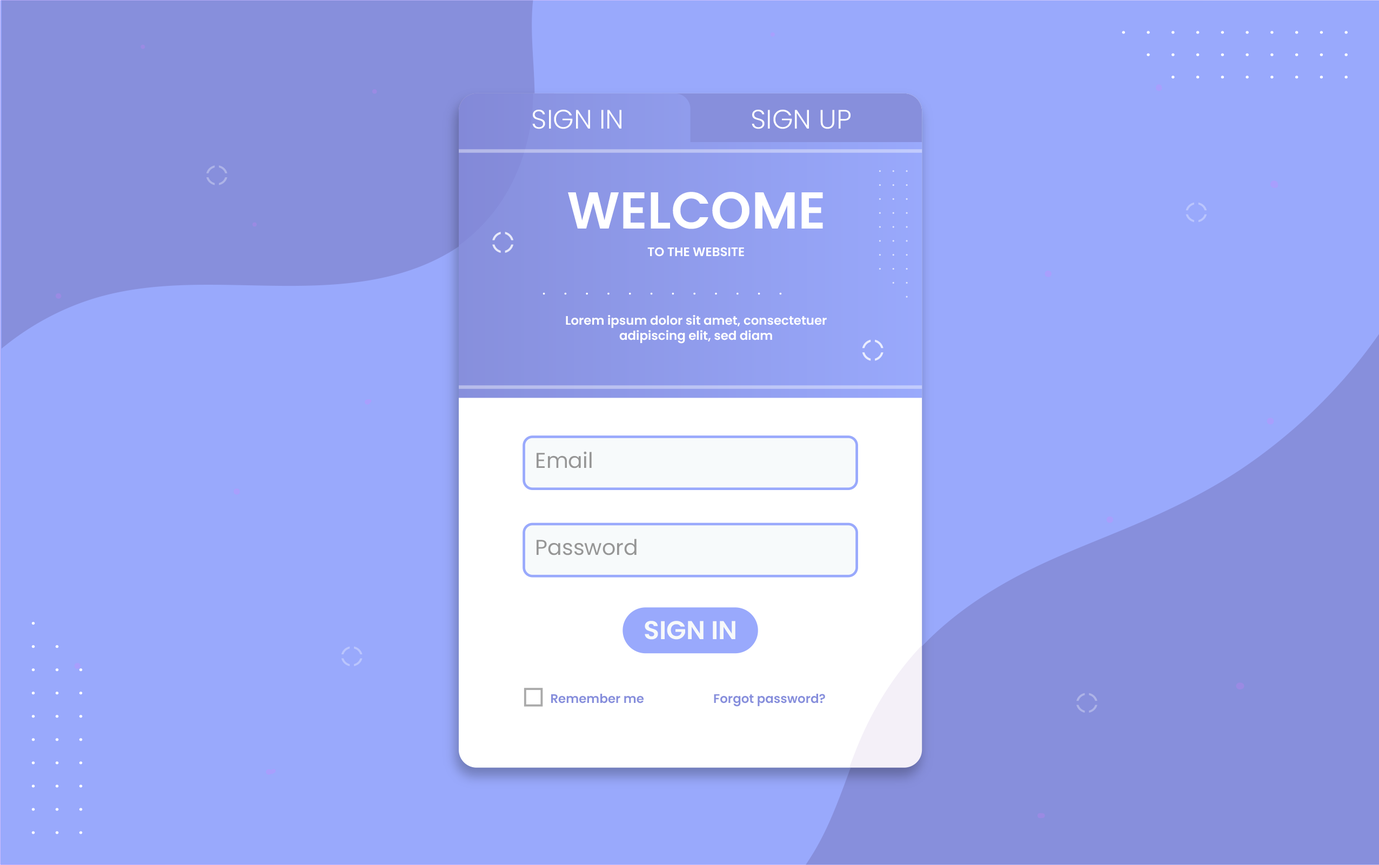
<style>
.page{position:relative;width:1379px;height:865px;background:#99a9fc}
.page>*{position:absolute;margin:0}
.t1{font:26.7px "Poppins-Light";color:#ffffff}
.t2{font:51.8px "Poppins-SemiBold";color:#ffffff}
.t3{font:12.4px "Poppins-SemiBold";color:#ffffff}
.t4{font:21.4px "Poppins-Regular";color:#969696}
.t5{font:25.8px "Poppins-SemiBold";color:#f7fafb}
.t6{font:12.4px "Poppins-SemiBold";color:#878fdc}
</style>
<div class="page">
<p class="t1" style="left:532px;top:110px;width:89px;height:19px">SIGN IN</p>
<p class="t1" style="left:751px;top:110px;width:99px;height:19px">SIGN UP</p>
<p class="t2" style="left:568px;top:192px;width:255px;height:37px">WELCOME</p>
<p class="t3" style="left:647px;top:247px;width:97px;height:10px">TO THE WEBSITE</p>
<p class="t3" style="left:566px;top:315px;width:261px;height:29px;text-align:center">Lorem ipsum dolor sit amet, consectetuer adipiscing elit, sed diam</p>
<p class="t4" style="left:536px;top:451px;width:56px;height:17px">Email</p>
<p class="t4" style="left:536px;top:539px;width:100px;height:16px">Password</p>
<p class="t5" style="left:644px;top:621px;width:91px;height:19px">SIGN IN</p>
<p class="t6" style="left:551px;top:694px;width:93px;height:9px">Remember me</p>
<p class="t6" style="left:714px;top:694px;width:111px;height:13px">Forgot password?</p>
</div>
